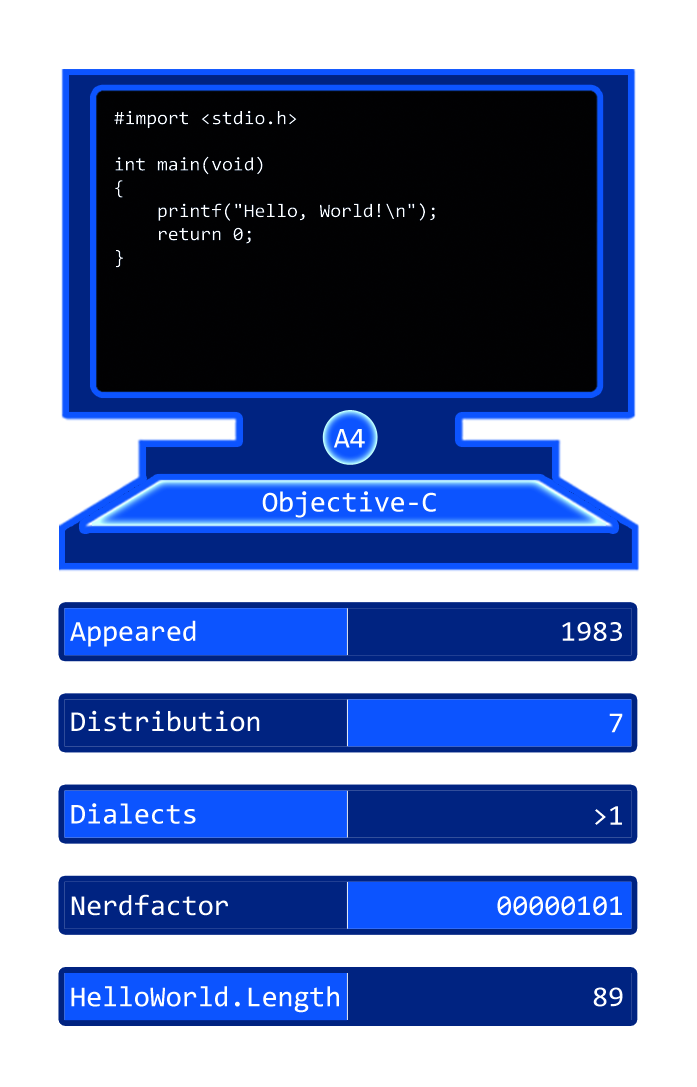
<style>
.page{position:relative;width:697px;height:1087px;background:#ffffff}
.page>*{position:absolute;margin:0}
.t1{font:19.3px "Consolas";color:#ffffff}
.t2{font:29px "Consolas";color:#ffffff}
</style>
<div class="page">
<p class="t1" style="left:114px;top:110px;width:321px;height:158px">#import &lt;stdio.h&gt;<br> <br>int main(void)<br>{<br>    printf("Hello, World!\n");<br>    return 0;<br>}</p>
<p class="t2" style="left:334px;top:429px;width:31px;height:19px">A4</p>
<p class="t2" style="left:262px;top:491px;width:174px;height:27px">Objective-C</p>
<p class="t2" style="left:70px;top:620px;width:126px;height:27px">Appeared</p>
<p class="t2" style="left:562px;top:622px;width:60px;height:19px">1983</p>
<p class="t2" style="left:71px;top:710px;width:189px;height:22px">Distribution</p>
<p class="t2" style="left:609px;top:713px;width:14px;height:20px">7</p>
<p class="t2" style="left:71px;top:803px;width:125px;height:21px">Dialects</p>
<p class="t2" style="left:595px;top:806px;width:27px;height:19px">&gt;1</p>
<p class="t2" style="left:71px;top:894px;width:157px;height:22px">Nerdfactor</p>
<p class="t2" style="left:497px;top:896px;width:125px;height:20px">00000101</p>
<p class="t2" style="left:71px;top:986px;width:268px;height:27px">HelloWorld.Length</p>
<p class="t2" style="left:593px;top:987px;width:30px;height:20px">89</p>
</div>
